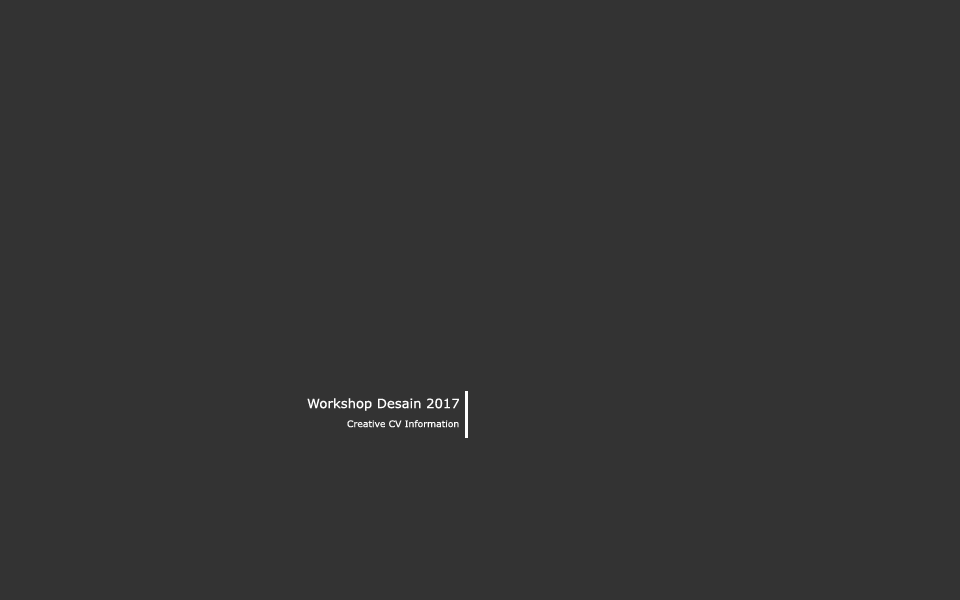
<style>
.page{position:relative;width:960px;height:600px;background:#333333}
.page>*{position:absolute;margin:0}
.t1{font:12.9px "Verdana";color:#fefefe}
.t2{font:9px "Verdana";color:#fefefe}
</style>
<div class="page">
<p class="t1" style="left:307px;top:398px;width:152px;height:13px">Workshop Desain 2017</p>
<p class="t2" style="left:347px;top:420px;width:112px;height:8px">Creative CV Information</p>
</div>
